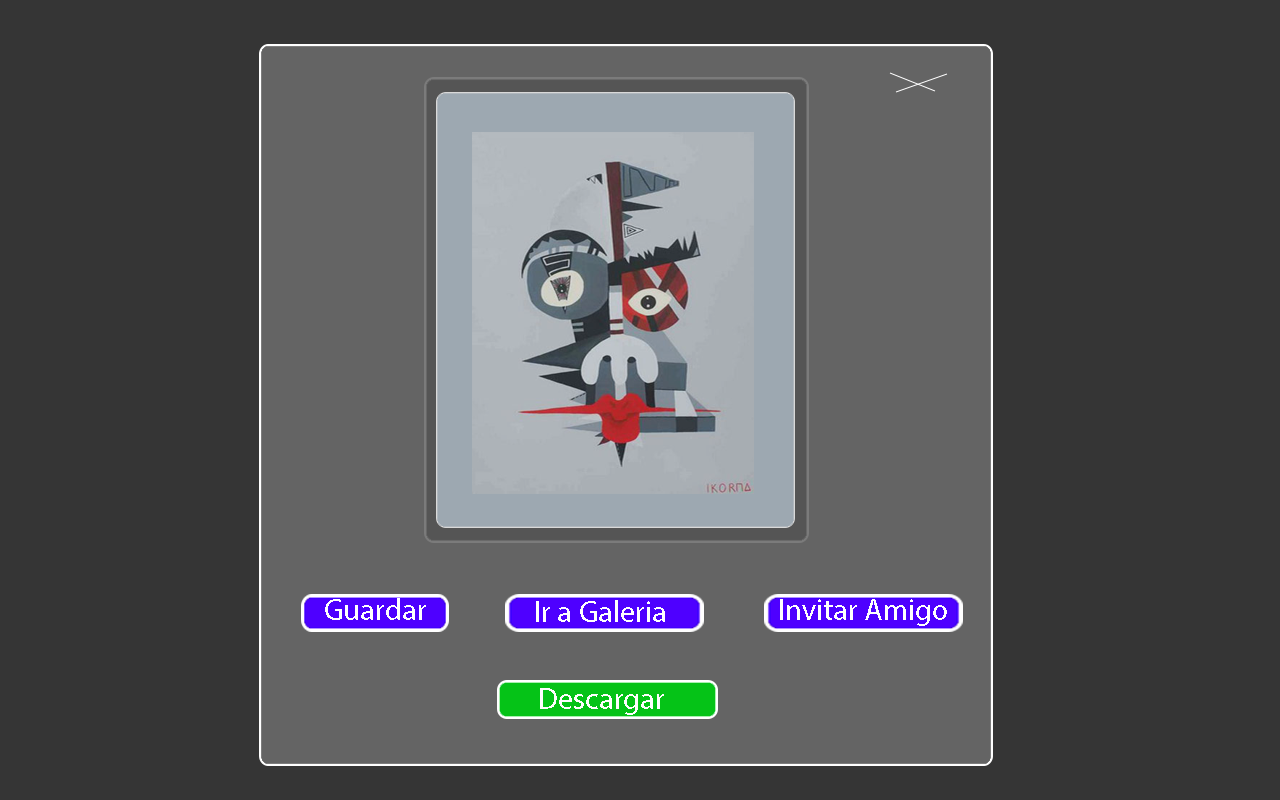
<style>
.page{position:relative;width:1280px;height:800px;background:#353535}
.page>*{position:absolute;margin:0}
.t1{font:30px "MyriadPro-Regular";color:#ffffff}
</style>
<div class="page">
<p class="t1" style="left:325px;top:598px;width:101px;height:22px">Guardar</p>
<p class="t1" style="left:536px;top:600px;width:129px;height:22px">Ir a Galeria</p>
<p class="t1" style="left:780px;top:599px;width:167px;height:27px">Invitar Amigo</p>
<p class="t1" style="left:540px;top:688px;width:124px;height:27px">Descargar</p>
</div>
